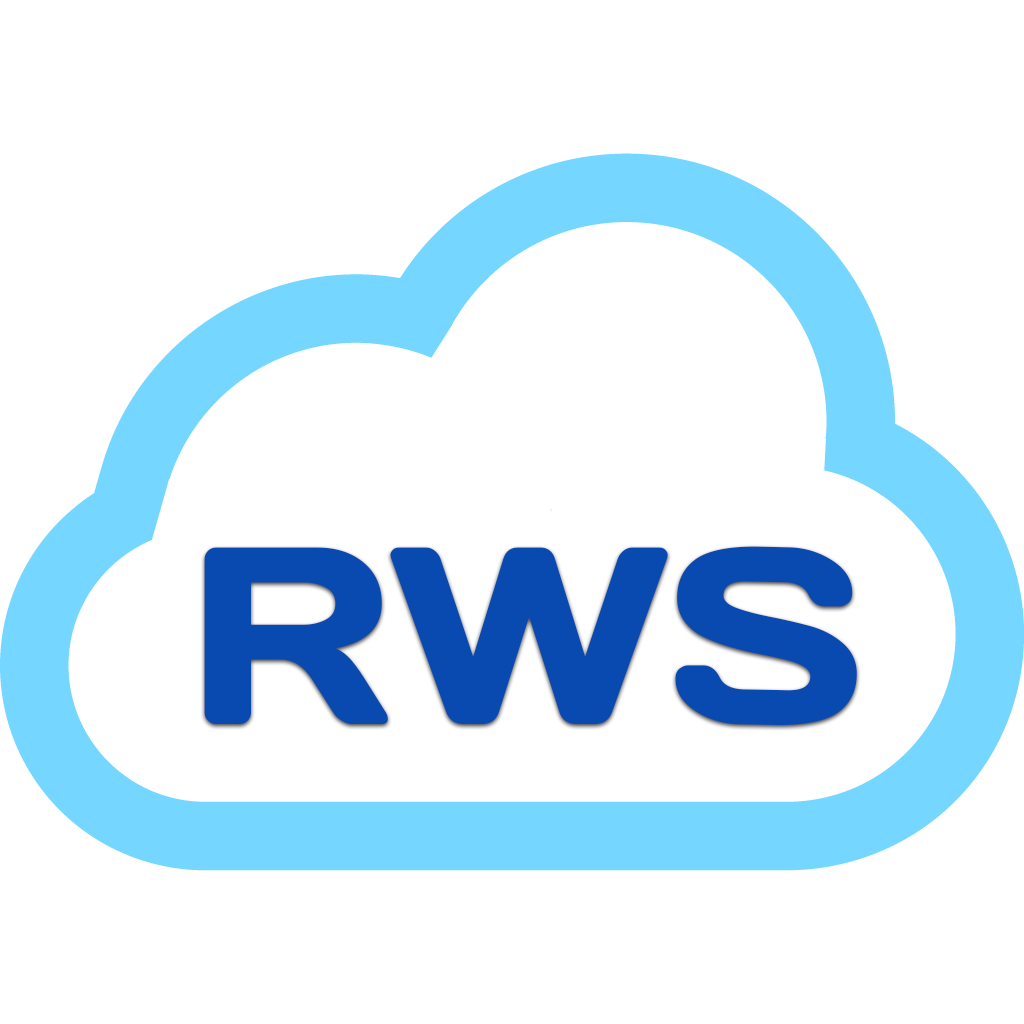
<style>
.page{position:relative;width:1024px;height:1024px;background:#ffffff}
.page>*{position:absolute;margin:0}
.t1{font:251.9px "DaysOne-Regular";color:#094ab1}
</style>
<div class="page">
<p class="t1" style="left:204px;top:546px;width:653px;height:179px">RWS</p>
</div>
